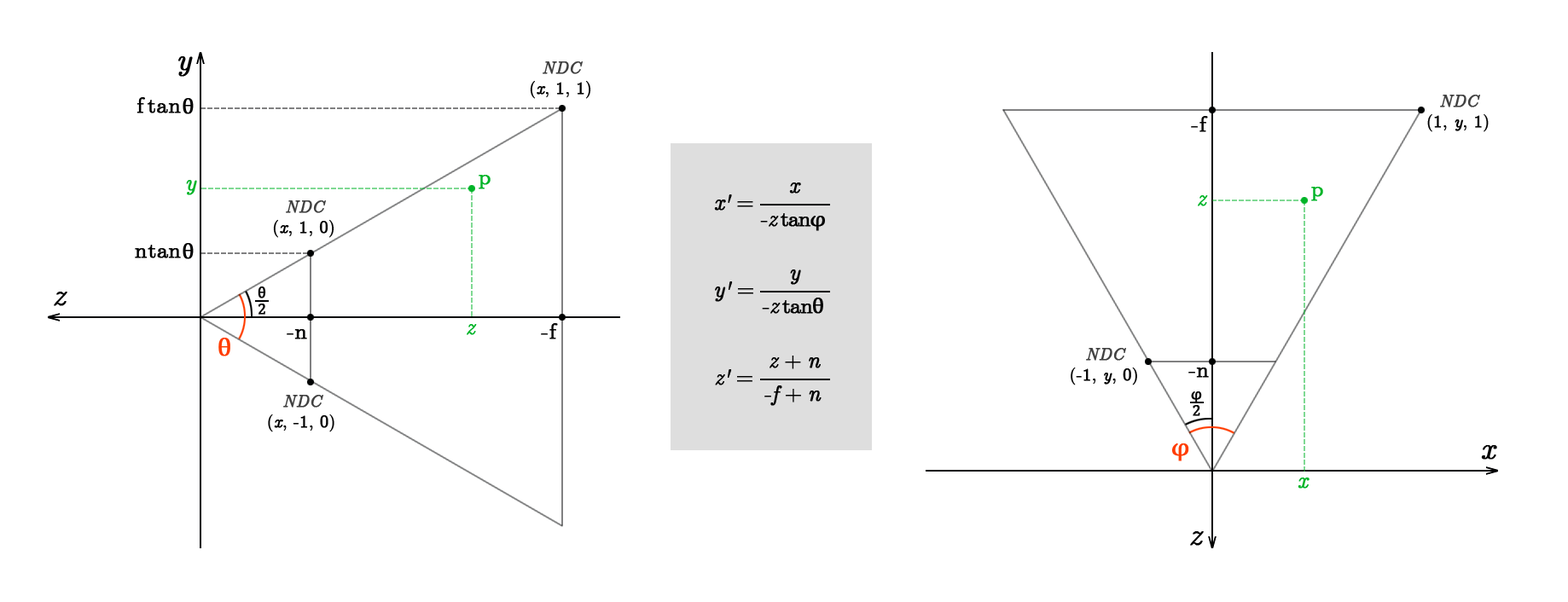
<style>
.page{position:relative;width:1568px;height:602px;background:#ffffff}
.page>*{position:absolute;margin:0}
.t1{font:30.7px "CMUSerif-Italic";color:#000000;font-weight:bold}
.t2{font:17.1px "CMUSerif-Italic";color:#404040;font-weight:bold}
.t3{font:17.1px "CMUSerif-Roman";color:#000000;font-weight:bold}
.t4{font:17.1px "CMUSerif-Italic";color:#000000;font-weight:bold}
.t5{font:22.2px "CMUSerif-Roman";color:#000000;font-weight:bold}
.t6{font:22.2px "CambriaMath";color:#000000;font-weight:bold}
.t7{font:22.2px "CMUSerif-Italic";letter-spacing:-0.06em;color:#00b428;font-weight:bold}
.t8{font:22.2px "CMUSerif-Roman";color:#00b428;font-weight:bold}
.t9{font:22.2px "CMUSerif-Italic";letter-spacing:-0.06em;color:#000000;font-weight:bold}
.t10{font:22.2px "CMUSerif-Roman";letter-spacing:-0.06em;color:#000000;font-weight:bold}
.t11{font:22.2px "CambriaMath";letter-spacing:-0.06em;color:#000000;font-weight:bold}
.t12{font:15.4px "CambriaMath";color:#000000;font-weight:bold}
.t13{font:25.6px "CambriaMath";color:#ff3c00;font-weight:bold}
</style>
<div class="page">
<p class="t1" style="left:178px;top:56px;width:15px;height:21px">y</p>
<p class="t2" style="left:543px;top:61px;width:40px;height:13px">NDC</p>
<p class="t3" style="left:530px;top:80px;width:61px;height:19px">(<span class="t4">x</span>, 1, 1)</p>
<p class="t5" style="left:136px;top:97px;width:45px;height:16px">f tan</p>
<p class="t6" style="left:183px;top:98px;width:11px;height:16px">θ</p>
<p class="t2" style="left:1440px;top:95px;width:40px;height:12px">NDC</p>
<p class="t5" style="left:1191px;top:116px;width:17px;height:16px">-f</p>
<p class="t3" style="left:1427px;top:114px;width:62px;height:18px">(1, <span class="t4">y</span>, 1)</p>
<p class="t7" style="left:186px;top:180px;width:11px;height:15px">y</p>
<p class="t8" style="left:479px;top:175px;width:12px;height:14px">p</p>
<p class="t9" style="left:789px;top:183px;width:12px;height:11px">x</p>
<p class="t9" style="left:714px;top:195px;width:39px;height:16px">x' <span class="t10">=</span></p>
<p class="t7" style="left:1198px;top:195px;width:10px;height:11px">z</p>
<p class="t8" style="left:1311px;top:187px;width:12px;height:14px">p</p>
<p class="t2" style="left:286px;top:200px;width:40px;height:13px">NDC</p>
<p class="t3" style="left:273px;top:219px;width:61px;height:19px">(<span class="t4">x</span>, 1, 0)</p>
<p class="t10" style="left:760px;top:213px;width:65px;height:18px">-<span class="t9">z </span>tan<span class="t11">φ</span></p>
<p class="t5" style="left:135px;top:245px;width:46px;height:13px">ntan</p>
<p class="t6" style="left:183px;top:243px;width:11px;height:16px">θ</p>
<p class="t9" style="left:790px;top:270px;width:11px;height:15px">y</p>
<p class="t9" style="left:715px;top:282px;width:38px;height:20px">y' <span class="t10">=</span></p>
<p class="t1" style="left:54px;top:292px;width:13px;height:14px">z</p>
<p class="t12" style="left:258px;top:287px;width:8px;height:12px">θ</p>
<p class="t12" style="left:258px;top:304px;width:7px;height:11px">2</p>
<p class="t10" style="left:762px;top:298px;width:61px;height:16px">-<span class="t9">z </span>tan<span class="t11">θ</span></p>
<p class="t5" style="left:287px;top:329px;width:20px;height:11px">-n</p>
<p class="t7" style="left:467px;top:324px;width:10px;height:11px">z</p>
<p class="t5" style="left:541px;top:323px;width:17px;height:17px">-f</p>
<p class="t13" style="left:218px;top:338px;width:12px;height:19px">θ</p>
<p class="t2" style="left:1086px;top:348px;width:40px;height:13px">NDC</p>
<p class="t9" style="left:769px;top:356px;width:52px;height:13px">z <span class="t10">+ </span>n</p>
<p class="t9" style="left:715px;top:369px;width:37px;height:17px">z' <span class="t10">=</span></p>
<p class="t3" style="left:1071px;top:368px;width:66px;height:18px">(-1, <span class="t4">y</span>, 0)</p>
<p class="t5" style="left:1188px;top:368px;width:21px;height:10px">-n</p>
<p class="t10" style="left:764px;top:386px;width:58px;height:20px">-<span class="t9">f </span>+ <span class="t9">n</span></p>
<p class="t2" style="left:283px;top:395px;width:40px;height:13px">NDC</p>
<p class="t12" style="left:1191px;top:392px;width:11px;height:12px">φ</p>
<p class="t12" style="left:1193px;top:405px;width:7px;height:11px">2</p>
<p class="t3" style="left:268px;top:415px;width:66px;height:18px">(<span class="t4">x</span>, -1, 0)</p>
<p class="t13" style="left:1172px;top:444px;width:17px;height:18px">φ</p>
<p class="t1" style="left:1481px;top:445px;width:16px;height:15px">x</p>
<p class="t7" style="left:1298px;top:478px;width:12px;height:11px">x</p>
<p class="t1" style="left:1190px;top:531px;width:14px;height:15px">z</p>
</div>
